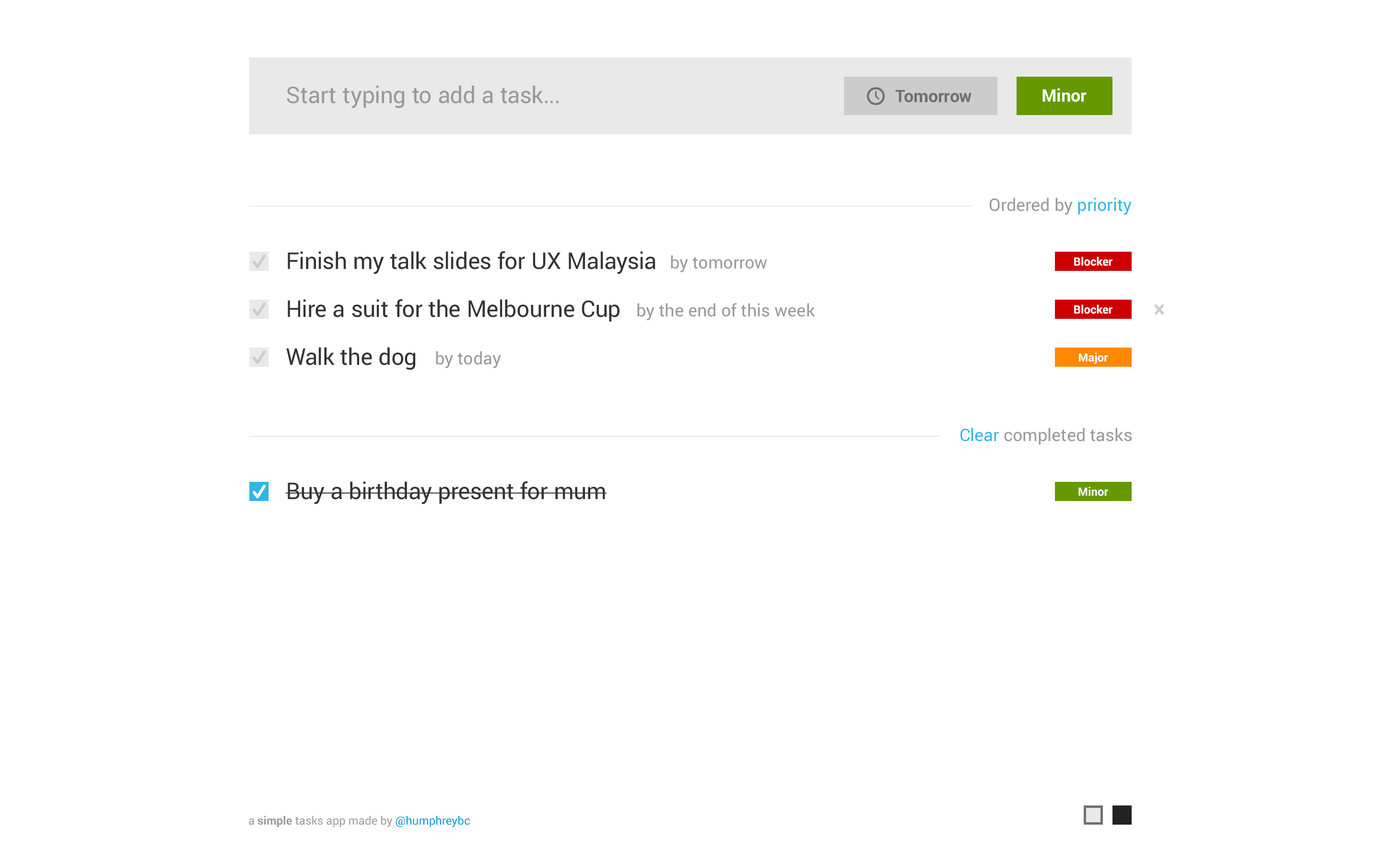
<style>
.page{position:relative;width:1381px;height:863px;background:#ffffff}
.page>*{position:absolute;margin:0}
.t1{font:23px "Roboto-Regular";color:#999999}
.t2{font:17.3px "Roboto-Bold";color:#707070}
.t3{font:17.3px "Roboto-Bold";color:#ffffff}
.t4{font:17.3px "Roboto-Regular";color:#999999}
.t5{font:17.3px "Roboto-Regular";color:#33b5e5}
.t6{font:23px "Roboto-Regular";color:#333333}
.t7{font:11.5px "Roboto-Bold";color:#ffffff}
.t8{font:11.5px "Roboto-Regular";color:#999999}
.t9{font:11.5px "Roboto-Bold";color:#999999}
.t10{font:11.5px "Roboto-Regular";color:#0099cc}
</style>
<div class="page">
<p class="t1" style="left:287px;top:85px;width:272px;height:23px">Start typing to add a task...</p>
<p class="t2" style="left:895px;top:90px;width:77px;height:13px">Tomorrow</p>
<p class="t3" style="left:1043px;top:88px;width:44px;height:14px">Minor</p>
<p class="t4" style="left:990px;top:198px;width:142px;height:17px">Ordered by <span class="t5">priority</span></p>
<p class="t6" style="left:288px;top:251px;width:368px;height:23px">Finish my talk slides for UX Malaysia</p>
<p class="t4" style="left:671px;top:255px;width:96px;height:17px">by tomorrow</p>
<p class="t7" style="left:1074px;top:257px;width:39px;height:9px">Blocker</p>
<p class="t6" style="left:288px;top:299px;width:332px;height:23px">Hire a suit for the Melbourne Cup</p>
<p class="t4" style="left:637px;top:303px;width:178px;height:17px">by the end of this week</p>
<p class="t7" style="left:1074px;top:305px;width:39px;height:9px">Blocker</p>
<p class="t6" style="left:286px;top:347px;width:129px;height:23px">Walk the dog</p>
<p class="t4" style="left:436px;top:351px;width:65px;height:17px">by today</p>
<p class="t7" style="left:1079px;top:353px;width:29px;height:11px">Major</p>
<p class="t4" style="left:961px;top:428px;width:171px;height:17px"><span class="t5">Clear</span> completed tasks</p>
<p class="t6" style="left:285px;top:482px;width:322px;height:23px">Buy a birthday present for mum</p>
<p class="t7" style="left:1079px;top:487px;width:29px;height:9px">Minor</p>
<p class="t8" style="left:249px;top:816px;width:221px;height:12px">a <span class="t9">simple</span> tasks app made by <span class="t10">@humphreybc</span></p>
</div>
